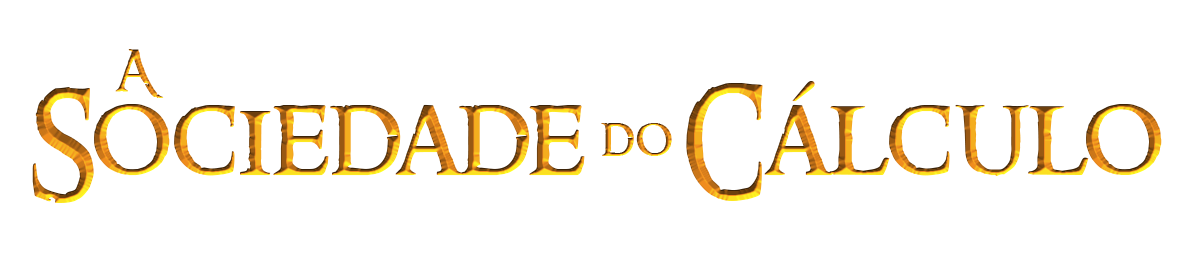
<style>
.page{position:relative;width:1200px;height:276px;background:#ffffff}
.page>*{position:absolute;margin:0}
.t1{font:112.5px "RingbearerMedium"}
.t2{font:52.1px "RingbearerMedium"}
</style>
<div class="page">
<p class="t1" style="left:32px;top:81px;width:1130px;height:122px">Sociedade    Cálculo</p>
<p class="t2" style="left:601px;top:123px;width:71px;height:33px">do</p>
</div>
